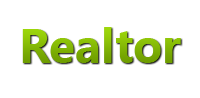
<style>
.page{position:relative;width:200px;height:98px;background:#ffffff}
.page>*{position:absolute;margin:0}
.t1{font:48px "SegoeUI-Bold";color:#80b404}
</style>
<div class="page">
<p class="t1" style="left:22px;top:27px;width:159px;height:36px">Realtor</p>
</div>
